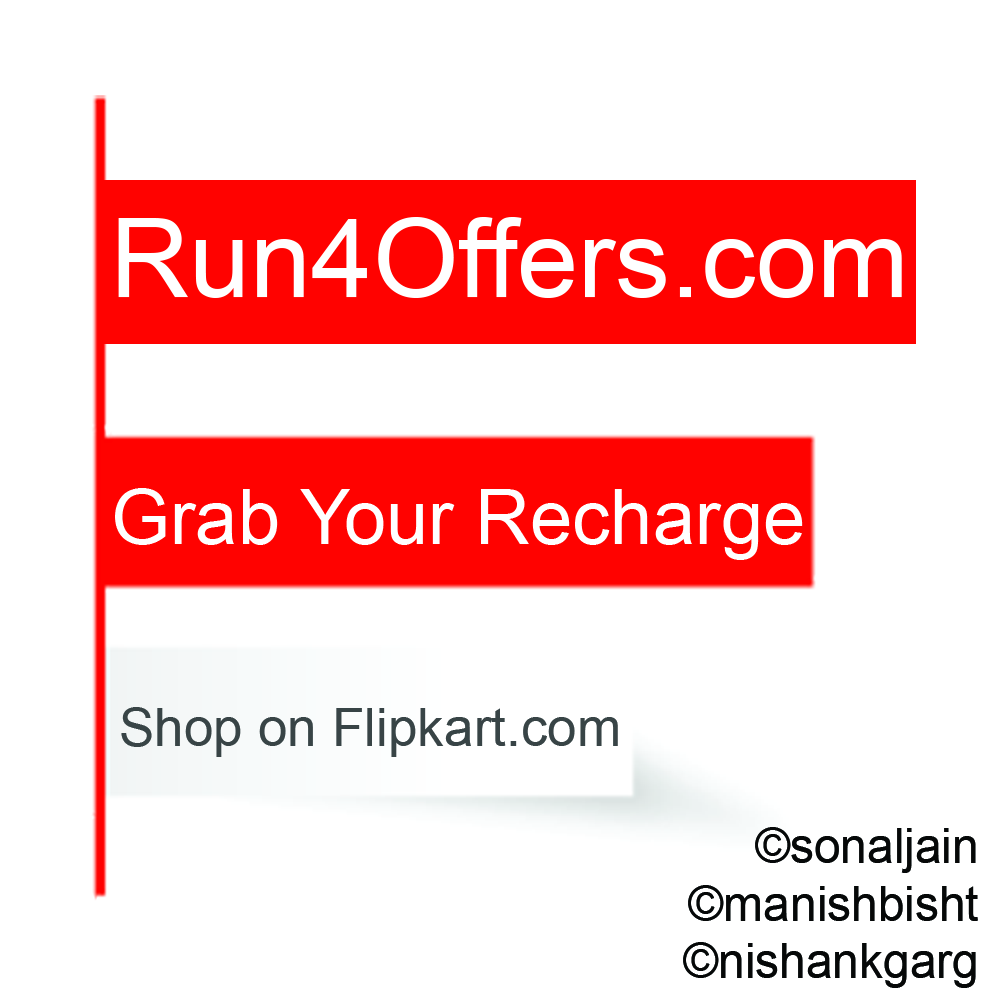
<style>
.page{position:relative;width:996px;height:996px;background:#ffffff}
.page>*{position:absolute;margin:0}
.t1{font:110px "ArialMT";color:#ffffff}
.t2{font:76.2px "ArialMT";color:#ffffff}
.t3{font:53.2px "ArialMT";color:#384446}
.t4{font:47.8px "ArialMT";color:#060808}
</style>
<div class="page">
<p class="t1" style="left:118px;top:217px;width:784px;height:81px">Run4Offers.com</p>
<p class="t2" style="left:115px;top:488px;width:688px;height:72px">Grab Your Recharge</p>
<p class="t3" style="left:121px;top:707px;width:497px;height:50px">Shop on Flipkart.com</p>
<p class="t4" style="left:683px;top:827px;width:295px;height:161px">sonaljain©<br>manishbisht©<br>nishankgarg©</p>
</div>
